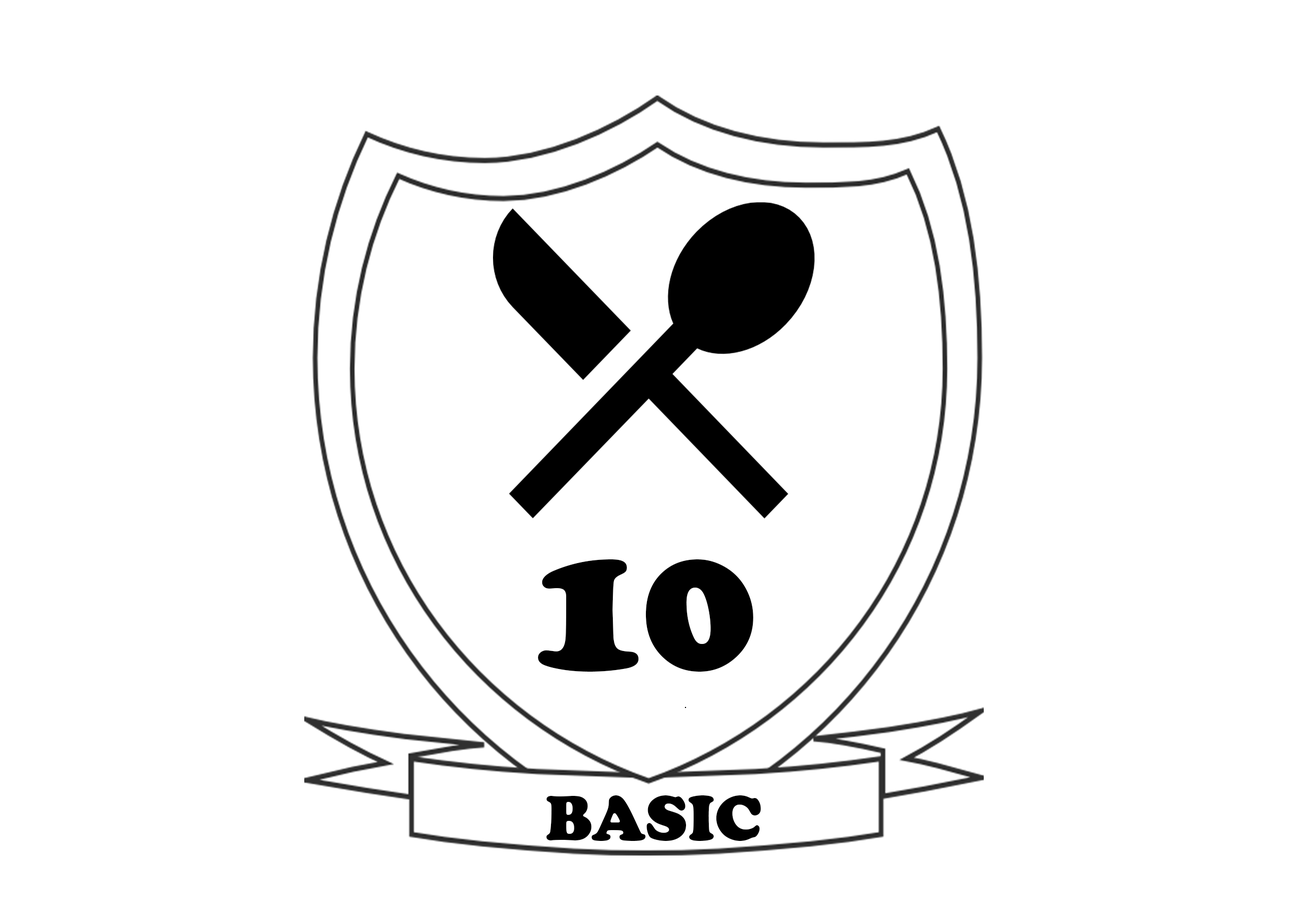
<style>
.page{position:relative;width:1307px;height:912px;background:#ffffff}
.page>*{position:absolute;margin:0}
.t1{font:195.3px "CooperBlack";color:#000000}
.t2{font:65.1px "CooperBlack";color:#000000}
</style>
<div class="page">
<p class="t1" style="left:538px;top:559px;width:216px;height:113px">10</p>
<p class="t2" style="left:546px;top:795px;width:215px;height:46px">BASIC</p>
</div>
